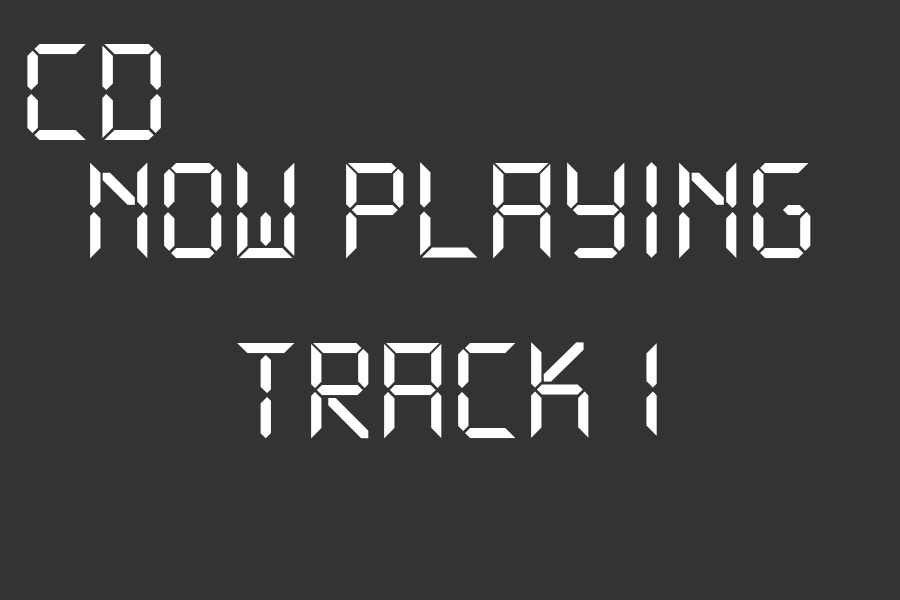
<style>
.page{position:relative;width:900px;height:600px;background:#333333}
.page>*{position:absolute;margin:0}
.t1{font:36.4px "DS-Digital";color:#ffffff}
.t2{font:150px "DS-Digital";color:#ffffff}
</style>
<div class="page">
<p class="t1" style="left:27px;top:44px;width:134px;height:96px">CD</p>
<p class="t2" style="left:90px;top:162px;width:721px;height:277px;text-align:center">now playing<br>track 1</p>
</div>
